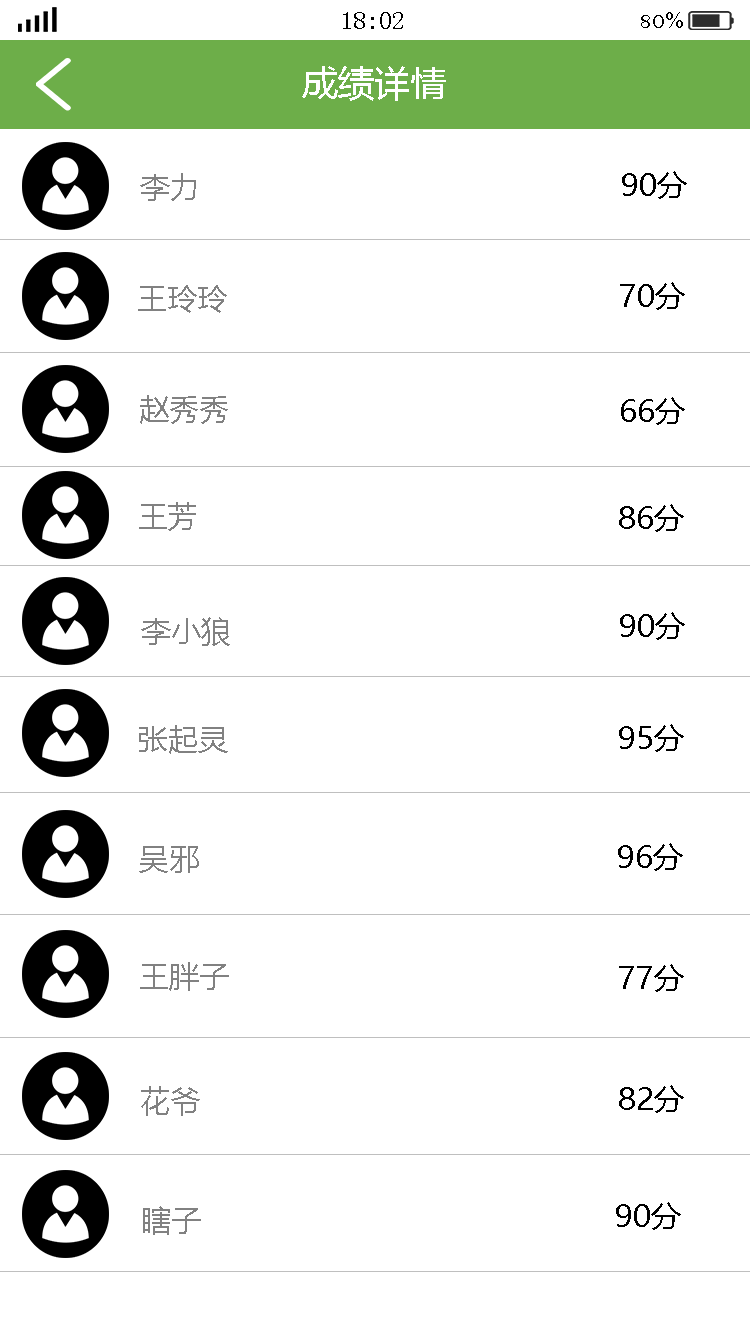
<style>
.page{position:relative;width:750px;height:1334px;background:#ffffff}
.page>*{position:absolute;margin:0}
.t1{font:25px "SimSun";color:#000000}
.t2{font:25px "BellMT";color:#000000}
.t3{font:36px "MicrosoftYaHei";color:#ffffff}
.t4{font:30px "MicrosoftYaHei";color:#818181}
.t5{font:30px "MicrosoftYaHei";color:#000000}
</style>
<div class="page">
<p class="t1" style="left:343px;top:12px;width:60px;height:17px">18:02</p>
<p class="t2" style="left:641px;top:12px;width:42px;height:16px">80%</p>
<p class="t3" style="left:302px;top:66px;width:144px;height:35px">成绩详情</p>
<p class="t4" style="left:140px;top:173px;width:56px;height:28px">李力</p>
<p class="t5" style="left:622px;top:171px;width:65px;height:28px">90分</p>
<p class="t4" style="left:138px;top:285px;width:89px;height:28px">王玲玲</p>
<p class="t5" style="left:620px;top:282px;width:65px;height:28px">70分</p>
<p class="t4" style="left:140px;top:395px;width:88px;height:29px">赵秀秀</p>
<p class="t5" style="left:621px;top:397px;width:64px;height:28px">66分</p>
<p class="t4" style="left:139px;top:502px;width:57px;height:29px">王芳</p>
<p class="t5" style="left:619px;top:504px;width:65px;height:28px">86分</p>
<p class="t4" style="left:141px;top:617px;width:89px;height:29px">李小狼</p>
<p class="t5" style="left:620px;top:612px;width:65px;height:28px">90分</p>
<p class="t4" style="left:139px;top:725px;width:89px;height:29px">张起灵</p>
<p class="t5" style="left:619px;top:724px;width:65px;height:28px">95分</p>
<p class="t4" style="left:139px;top:846px;width:60px;height:27px">吴邪</p>
<p class="t5" style="left:618px;top:843px;width:65px;height:28px">96分</p>
<p class="t4" style="left:140px;top:962px;width:89px;height:29px">王胖子</p>
<p class="t5" style="left:619px;top:964px;width:65px;height:28px">77分</p>
<p class="t4" style="left:141px;top:1086px;width:59px;height:30px">花爷</p>
<p class="t5" style="left:619px;top:1085px;width:65px;height:28px">82分</p>
<p class="t4" style="left:143px;top:1206px;width:58px;height:29px">瞎子</p>
<p class="t5" style="left:616px;top:1202px;width:65px;height:28px">90分</p>
</div>
